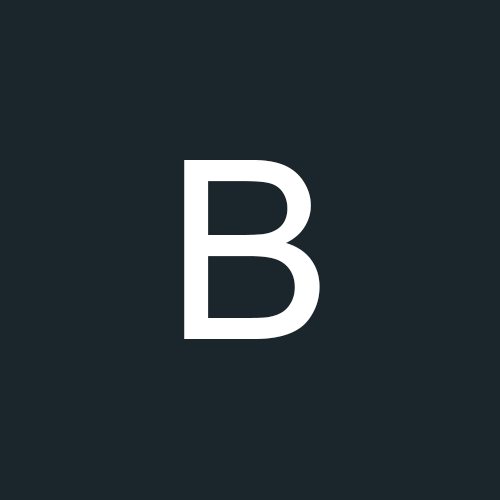
<style>
.page{position:relative;width:500px;height:500px;background:#1b262c}
.page>*{position:absolute;margin:0}
.t1{font:250px "ArialMT";color:#ffffff}
</style>
<div class="page">
<p class="t1" style="left:184px;top:160px;width:136px;height:179px">B</p>
</div>
